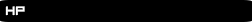
<style>
.page{position:relative;width:252px;height:22px;background:#000000}
.page>*{position:absolute;margin:0}
.t1{font:12px "Pixelation";color:#ffffff}
</style>
<div class="page">
<p class="t1" style="left:5px;top:6px;width:20px;height:10px">HP</p>
</div>
